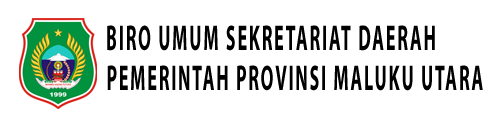
<style>
.page{position:relative;width:500px;height:127px;background:#ffffff}
.page>*{position:absolute;margin:0}
.t1{font:36px "MyriadPro-Bold";letter-spacing:0.1em;color:#000000;scale:0.5 1}
</style>
<div class="page">
<p class="t1" style="left:107px;top:25px;width:328px;height:26px">BIRO UMUM SEKRETARIAT DAERAH</p>
<p class="t1" style="left:107px;top:65px;width:376px;height:26px">PEMERINTAH PROVINSI MALUKU UTARA</p>
</div>
